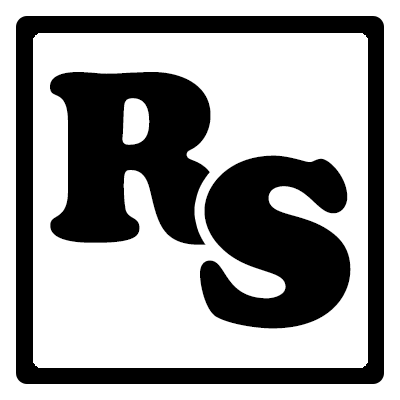
<style>
.page{position:relative;width:400px;height:400px;background:#ffffff}
.page>*{position:absolute;margin:0}
.t1{font:237.2px "CooperBlackStd";color:#000000}
</style>
<div class="page">
<p class="t1" style="left:50px;top:72px;width:188px;height:173px">R</p>
<p class="t1" style="left:200px;top:155px;width:151px;height:174px">S</p>
</div>
